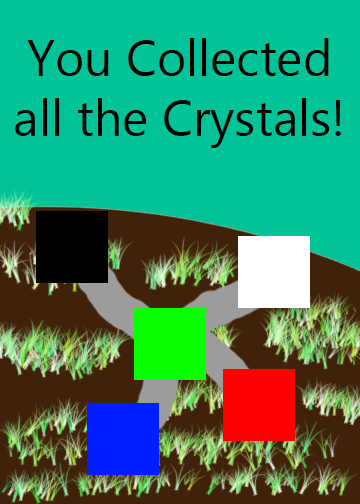
<style>
.page{position:relative;width:360px;height:504px;background:#00c397}
.page>*{position:absolute;margin:0}
.t1{font:50px "MicrosoftNewTaiLue";color:#000000}
</style>
<div class="page">
<p class="t1" style="left:15px;top:38px;width:326px;height:110px;text-align:center">You Collected all the Crystals!</p>
</div>
